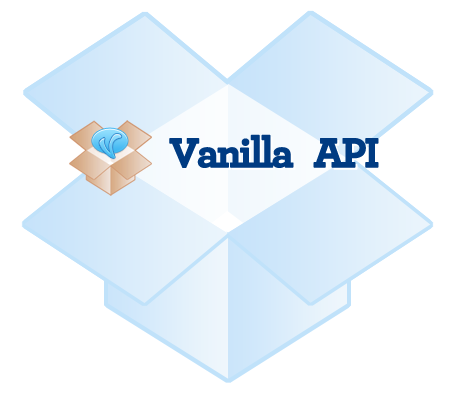
<style>
.page{position:relative;width:454px;height:400px;background:#ffffff}
.page>*{position:absolute;margin:0}
.t1{font:43px "Archer-Bold";letter-spacing:-0.075em;color:#003b82;font-weight:bold}
</style>
<div class="page">
<p class="t1" style="left:169px;top:134px;width:210px;height:34px">Vanilla   API</p>
<p class="t1" style="left:171px;top:136px;width:210px;height:34px">Vanilla   API</p>
</div>
